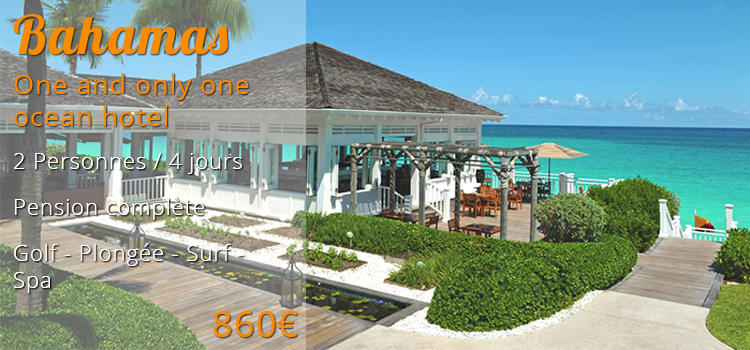
<style>
.page{position:relative;width:750px;height:350px}
.page>*{position:absolute;margin:0}
.t1{font:53.3px "Lobster";letter-spacing:0.04em;color:#f78c00}
.t2{font:26.7px "OpenSans";letter-spacing:0.04em;color:#f78c00}
.t3{font:22.2px "OpenSans-Light";letter-spacing:0.04em;color:#ffffff}
.t4{font:35.6px "OpenSans";letter-spacing:0.04em;color:#f78c00}
</style>
<div class="page">
<p class="t1" style="left:13px;top:14px;width:215px;height:41px">Bahamas</p>
<p class="t2" style="left:14px;top:73px;width:235px;height:53px">One and only one<br>ocean hotel</p>
<p class="t3" style="left:14px;top:153px;width:228px;height:21px">2 Personnes / 4 jours</p>
<p class="t3" style="left:14px;top:153px;width:228px;height:21px">2 Personnes / 4 jours</p>
<p class="t3" style="left:15px;top:197px;width:189px;height:23px">Pension complète</p>
<p class="t3" style="left:15px;top:197px;width:189px;height:23px">Pension complète</p>
<p class="t3" style="left:14px;top:243px;width:230px;height:50px">Golf - Plongée - Surf - Spa</p>
<p class="t3" style="left:14px;top:243px;width:230px;height:50px">Golf - Plongée - Surf - Spa</p>
<p class="t4" style="left:213px;top:311px;width:85px;height:26px">860€</p>
</div>
